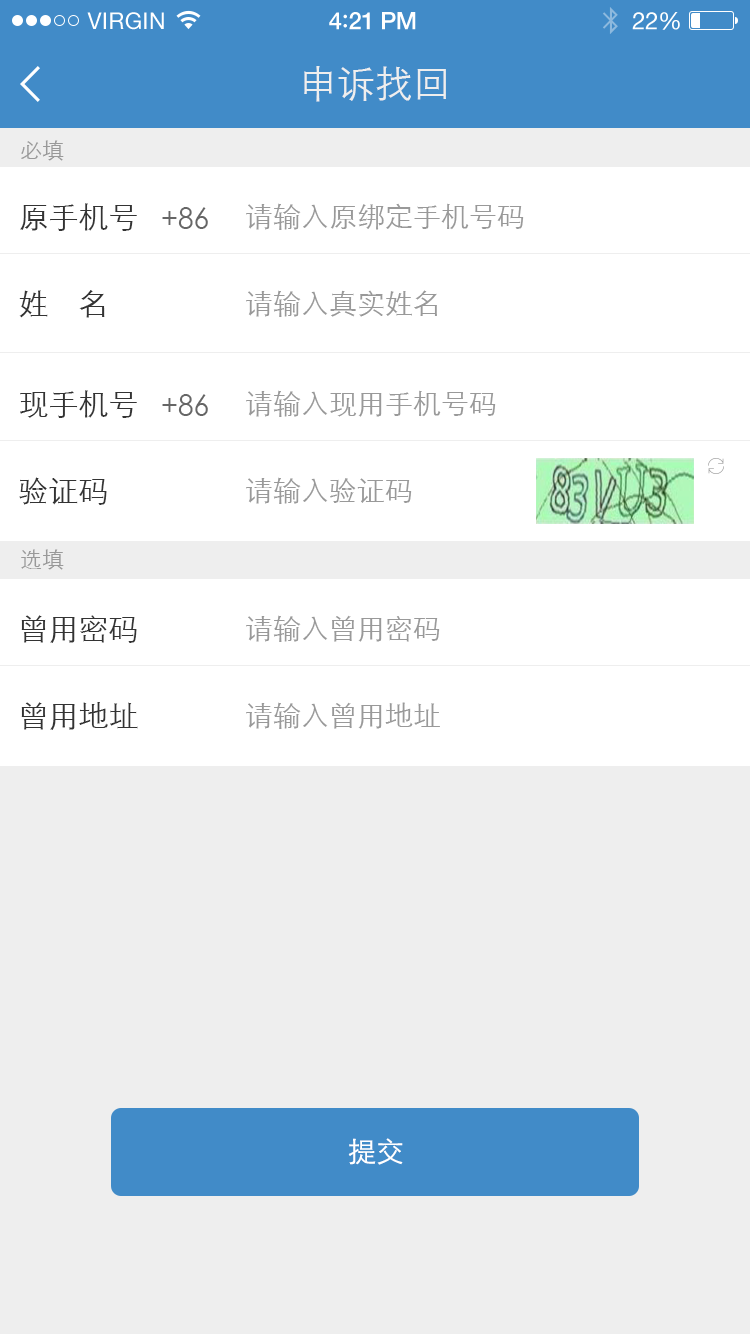
<style>
.page{position:relative;width:750px;height:1334px;background:#eeeeee}
.page>*{position:absolute;margin:0}
.t1{font:23px "HelveticaNeue";letter-spacing:0.02em;color:#ffffff}
.t2{font:24px "HelveticaNeue-Medium";letter-spacing:-0.02em;color:#ffffff}
.t3{font:26px "Avenir-Medium";letter-spacing:-0.02em;color:#ffffff}
.t4{font:24px "HelveticaNeue";letter-spacing:-0.02em;color:#ffffff}
.t5{font:38px "STXihei";color:#eeeeee}
.t6{font:22px "STXihei";color:#999999}
.t7{font:30px "STXihei";color:#333333}
.t8{font:28px "STXihei";color:#666666}
.t9{font:28px "STXihei";color:#999999}
.t10{font:28px "STXihei";color:#ffffff}
</style>
<div class="page">
<p class="t1" style="left:87px;top:12px;width:77px;height:18px">VIRGIN</p>
<p class="t2" style="left:329px;top:12px;width:87px;height:18px">4<span class="t3">:</span>21 PM</p>
<p class="t4" style="left:632px;top:12px;width:48px;height:18px">22%</p>
<p class="t5" style="left:304px;top:66px;width:142px;height:36px">申诉找回</p>
<p class="t6" style="left:21px;top:140px;width:43px;height:21px">必填</p>
<p class="t7" style="left:20px;top:203px;width:117px;height:28px">原手机号</p>
<p class="t8" style="left:162px;top:207px;width:46px;height:22px">+86</p>
<p class="t9" style="left:246px;top:203px;width:278px;height:27px">请输入原绑定手机号码</p>
<p class="t7" style="left:19px;top:290px;width:86px;height:28px">姓    名</p>
<p class="t9" style="left:246px;top:290px;width:191px;height:27px">请输入真实姓名</p>
<p class="t7" style="left:20px;top:390px;width:117px;height:28px">现手机号</p>
<p class="t9" style="left:246px;top:390px;width:250px;height:27px">请输入现用手机号码</p>
<p class="t8" style="left:162px;top:394px;width:46px;height:22px">+86</p>
<p class="t7" style="left:19px;top:477px;width:88px;height:28px">验证码</p>
<p class="t9" style="left:246px;top:477px;width:166px;height:27px">请输入验证码</p>
<p class="t6" style="left:21px;top:549px;width:43px;height:21px">选填</p>
<p class="t7" style="left:21px;top:615px;width:116px;height:28px">曾用密码</p>
<p class="t9" style="left:246px;top:615px;width:194px;height:27px">请输入曾用密码</p>
<p class="t7" style="left:21px;top:702px;width:117px;height:28px">曾用地址</p>
<p class="t9" style="left:246px;top:702px;width:194px;height:27px">请输入曾用地址</p>
<p class="t10" style="left:348px;top:1138px;width:55px;height:27px">提交</p>
</div>
